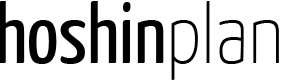
<style>
.page{position:relative;width:293px;height:80px;background:#ffffff}
.page>*{position:absolute;margin:0}
.t1{font:85.1px "YanoneKaffeesatz-Regular";color:#010100}
.t2{font:85.1px "YanoneKaffeesatz-Thin";color:#010100}
</style>
<div class="page">
<p class="t1" style="left:0px;top:1px;width:279px;height:79px">hoshin<span class="t2">plan</span></p>
</div>
